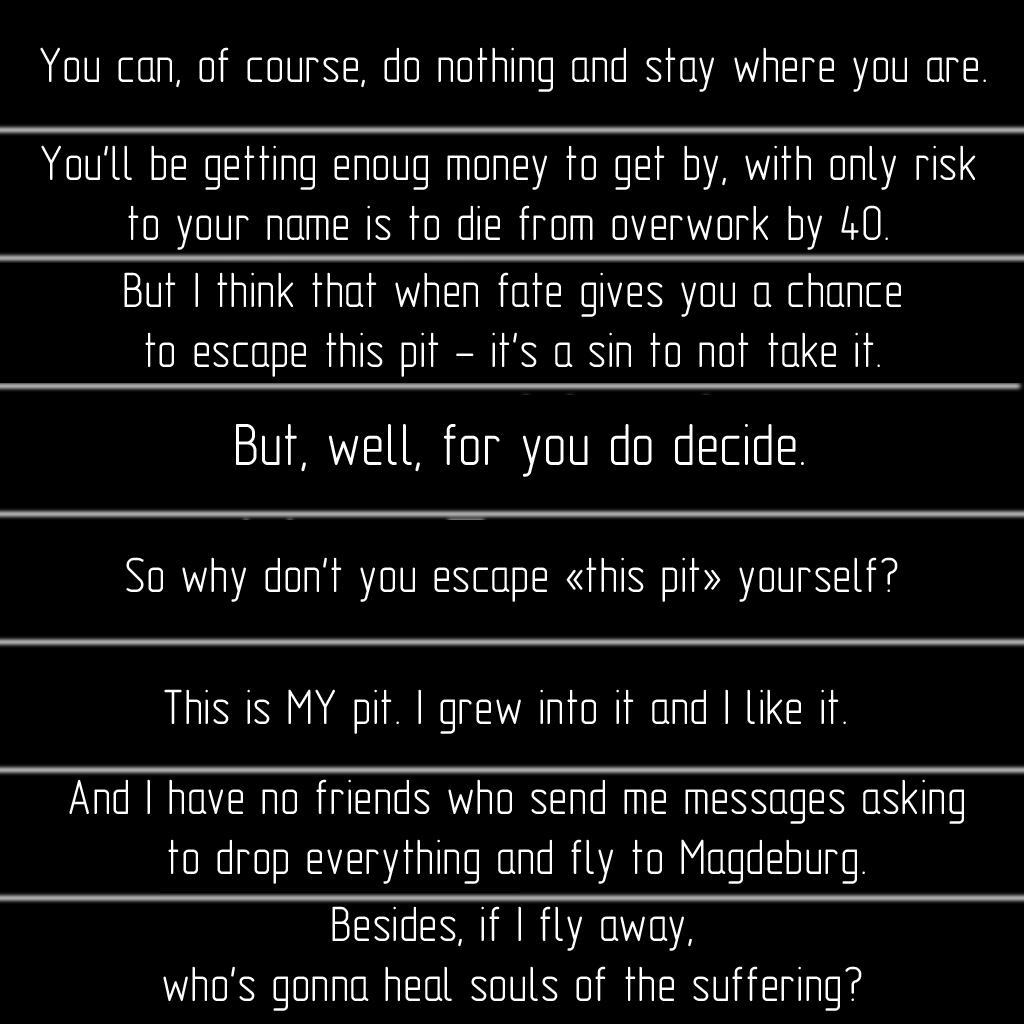
<style>
.page{position:relative;width:1024px;height:1024px;background:#000000}
.page>*{position:absolute;margin:0}
.t1{font:50px "GOST-2.304-81typeA";color:#ffffff}
.t2{font:60px "GOST-2.304-81typeA";color:#ffffff}
</style>
<div class="page">
<p class="t1" style="left:40px;top:47px;width:946px;height:45px">You can, of course, do nothing and stay where you are.</p>
<p class="t1" style="left:41px;top:145px;width:935px;height:105px;text-align:center">You'll be getting enoug money to get by, with only risk<br>to your name is to die from overwork by 40.</p>
<p class="t1" style="left:124px;top:272px;width:777px;height:105px;text-align:center">But I think that when fate gives you a chance<br>to escape this pit - it's a sin to not take it.</p>
<p class="t2" style="left:236px;top:424px;width:568px;height:53px">But, well, for you do decide.</p>
<p class="t1" style="left:126px;top:557px;width:772px;height:45px">So why don't you escape «this pit» yourself?</p>
<p class="t1" style="left:164px;top:689px;width:682px;height:45px">This is MY pit. I grew into it and I like it.</p>
<p class="t1" style="left:69px;top:779px;width:895px;height:105px;text-align:center">And I have no friends who send me messages asking<br>to drop everything and fly to Magdeburg.</p>
<p class="t1" style="left:163px;top:906px;width:699px;height:105px;text-align:center">Besides, if I fly away,<br>who's gonna heal souls of the suffering?</p>
</div>
